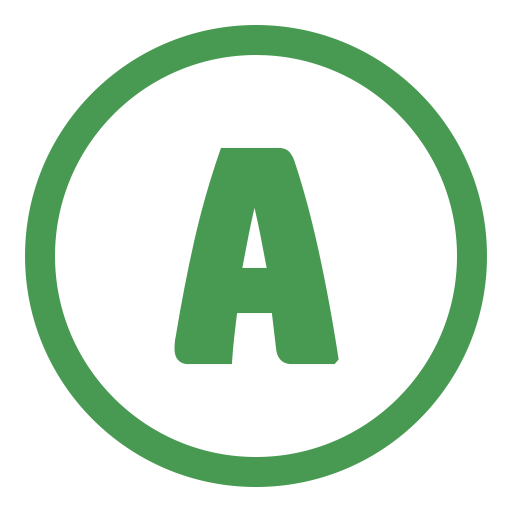
<style>
.page{position:relative;width:512px;height:512px;background:#ffffff}
.page>*{position:absolute;margin:0}
.t1{font:300px "HPSimplified-Bold";color:#489a52;text-transform:uppercase;font-weight:bold}
</style>
<div class="page">
<p class="t1" style="left:174px;top:147px;width:165px;height:218px">A</p>
</div>
